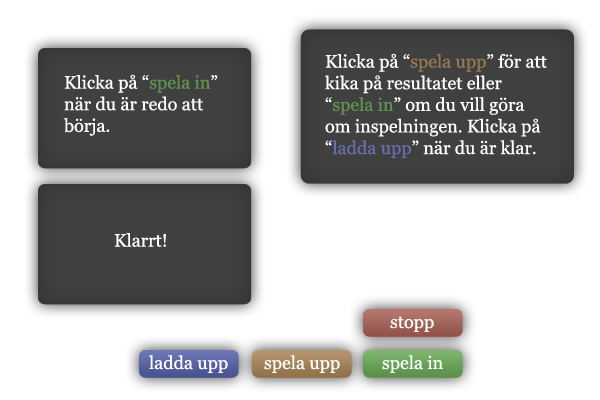
<style>
.page{position:relative;width:600px;height:400px;background:#ffffff}
.page>*{position:absolute;margin:0}
.t1{font:18px "Georgia";color:#ffffff}
.t2{font:18px "Georgia";color:#987850}
.t3{font:18px "Georgia";color:#5e944d}
.t4{font:18px "Georgia";color:#6770ae}
</style>
<div class="page">
<p class="t1" style="left:325px;top:53px;width:222px;height:105px">Klicka på “<span class="t2">spela upp</span>” för att kika på resultatet eller “<span class="t3">spela in</span>” om du vill göra om inspelningen. Klicka på “<span class="t4">ladda upp</span>” när du är klar.</p>
<p class="t1" style="left:63px;top:74px;width:155px;height:62px">Klicka på “<span class="t3">spela in</span>” när du är redo att börja.</p>
<p class="t1" style="left:114px;top:233px;width:52px;height:14px">Klarrt!</p>
<p class="t1" style="left:390px;top:316px;width:44px;height:16px">stopp</p>
<p class="t1" style="left:149px;top:355px;width:79px;height:18px">ladda upp</p>
<p class="t1" style="left:264px;top:355px;width:76px;height:18px">spela upp</p>
<p class="t1" style="left:382px;top:355px;width:61px;height:18px">spela in</p>
</div>
